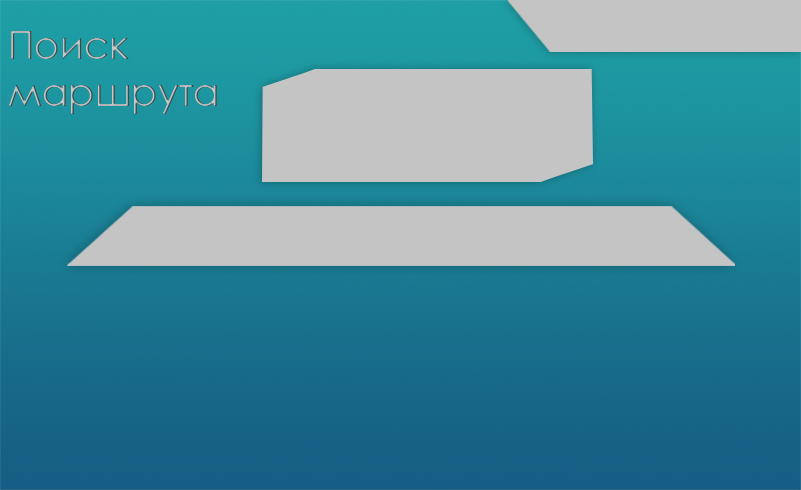
<style>
.page{position:relative;width:801px;height:490px;background:#c4c4c4}
.page>*{position:absolute;margin:0}
.t1{font:38.8px "CenturyGothic"}
</style>
<div class="page">
<p class="t1" style="left:9px;top:31px;width:208px;height:83px">Поиск<br>маршрута</p>
</div>
